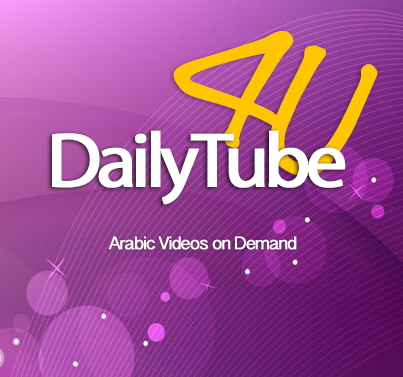
<style>
.page{position:relative;width:403px;height:377px}
.page>*{position:absolute;margin:0}
.t1{font:142.7px "Noteworthy-Light";letter-spacing:-0.085em;color:#ffc600;font-weight:bold;scale:1.05 1}
.t2{font:77.7px "MyriadPro-Regular";letter-spacing:-0.085em;color:#ffffff;font-weight:bold;scale:1.05 1}
.t3{font:18px "MyanmarSangamMN";letter-spacing:-0.085em;color:#ffffff;font-weight:bold;scale:1.05 1}
</style>
<div class="page">
<p class="t1" style="left:173px;top:31px;width:205px;height:146px;rotate:24deg">4U</p>
<p class="t2" style="left:52px;top:130px;width:294px;height:75px">DailyTube</p>
<p class="t3" style="left:108px;top:236px;width:189px;height:14px">Arabic Videos on Demand</p>
</div>
